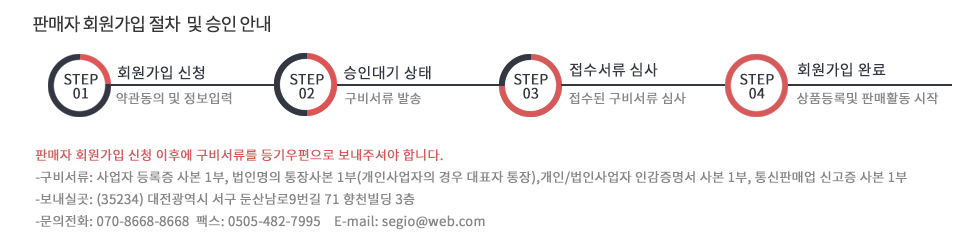
<style>
.page{position:relative;width:975px;height:250px;background:#ffffff}
.page>*{position:absolute;margin:0}
.t1{font:18px "NotoSansCJKkr-Regular";letter-spacing:-0.075em;color:#373737;font-weight:bold}
.t2{font:15px "NotoSansCJKkr-Regular";color:#333742;font-weight:bold}
.t3{font:14px/14px "NotoSansCJKkr-Regular";color:#333742;font-weight:bold}
.t4{font:13px "NotoSansCJKkr-Regular";color:#878787;font-weight:bold}
.t5{font:13px/22px "NotoSansCJKkr-Regular";color:#878787;font-weight:bold}
.t6{font:13px/22px "NotoSansCJKkr-Regular";color:#d65a5a;font-weight:bold}
</style>
<div class="page">
<p class="t1" style="left:33px;top:15px;width:237px;height:18px">판매자 회원가입 절차  및 승인 안내</p>
<p class="t2" style="left:117px;top:65px;width:87px;height:15px">회원가입 신청</p>
<p class="t2" style="left:344px;top:65px;width:87px;height:15px">승인대기 상태</p>
<p class="t2" style="left:569px;top:62px;width:89px;height:15px">접수서류 심사</p>
<p class="t2" style="left:797px;top:62px;width:89px;height:15px">회원가입 완료</p>
<p class="t3" style="left:64px;top:73px;width:34px;height:26px;text-align:center">STEP<br>01</p>
<p class="t3" style="left:290px;top:73px;width:34px;height:26px;text-align:center">STEP<br>02</p>
<p class="t3" style="left:514px;top:73px;width:34px;height:26px;text-align:center">STEP<br>03</p>
<p class="t3" style="left:740px;top:73px;width:34px;height:26px;text-align:center">STEP<br>04</p>
<p class="t4" style="left:116px;top:92px;width:116px;height:13px">약관동의 및 정보입력</p>
<p class="t4" style="left:345px;top:92px;width:76px;height:13px">구비서류 발송</p>
<p class="t4" style="left:569px;top:92px;width:117px;height:13px">접수된 구비서류 심사</p>
<p class="t4" style="left:797px;top:92px;width:142px;height:13px">상품등록및 판매활동 시작</p>
<p class="t5" style="left:35px;top:149px;width:872px;height:81px"><span class="t6">판매자 회원가입 신청 이후에 구비서류를 등기우편으로 보내주셔야 합니다.<br></span>-구비서류: 사업자 등록증 사본 1부, 법인명의 통장사본 1부(개인사업자의 경우 대표자 통장),개인/법인사업자 인감증명서 사본 1부, 통신판매업 신고증 사본 1부<br>-보내실곳: (35234) 대전광역시 서구 둔산남로9번길 71 향천빌딩 3층<br>-문의전화: 070-8668-8668  팩스: 0505-482-7995    E-mail: segio@web.com</p>
</div>
